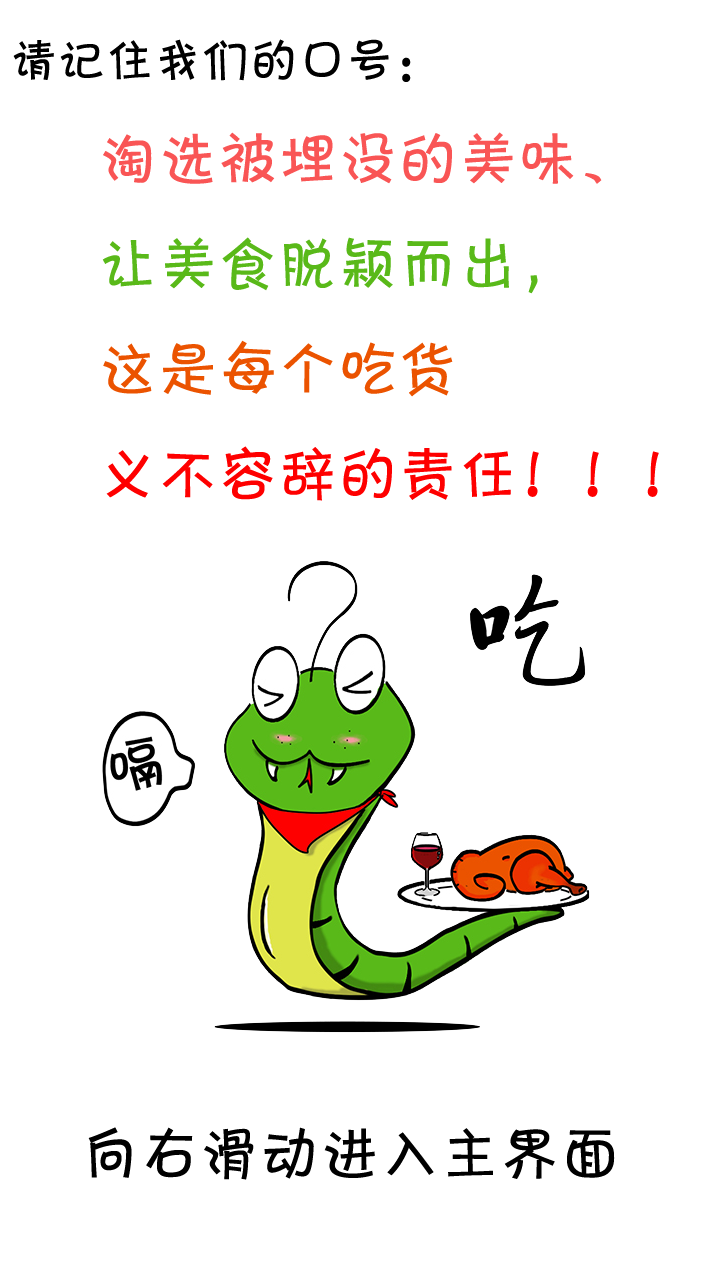
<style>
.page{position:relative;width:720px;height:1280px;background:#ffffff}
.page>*{position:absolute;margin:0}
.t1{font:48px "FZKATJW--GB1-0";color:#000000}
.t2{font:60px "FZKATJW--GB1-0";color:#fe0000}
.t3{font:60px "FZKATJW--GB1-0";color:#f95555}
.t4{font:60px "FZKATJW--GB1-0";color:#59b919}
.t5{font:60px "FZKATJW--GB1-0";color:#eb5300}
.t6{font:60px "FZKATJW--GB1-0";color:#000000}
</style>
<div class="page">
<p class="t1" style="left:13px;top:39px;width:398px;height:43px">请记住我们的口号：</p>
<p class="t2" style="left:102px;top:132px;width:557px;height:369px"><span class="t3">淘选被埋没的美味、<br></span><span class="t4">让美食脱颖而出，<br></span><span class="t5">这是每个吃货<br></span>义不容辞的责任！！！</p>
<p class="t6" style="left:88px;top:1127px;width:527px;height:53px">向右滑动进入主界面</p>
</div>
